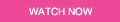
<style>
.page{position:relative;width:120px;height:22px;background:#ee4999}
.page>*{position:absolute;margin:0}
.t1{font:10px "HelveticaLTStd-Roman";color:#ffffff}
</style>
<div class="page">
<p class="t1" style="left:29px;top:7px;width:64px;height:9px">WATCH NOW</p>
</div>
